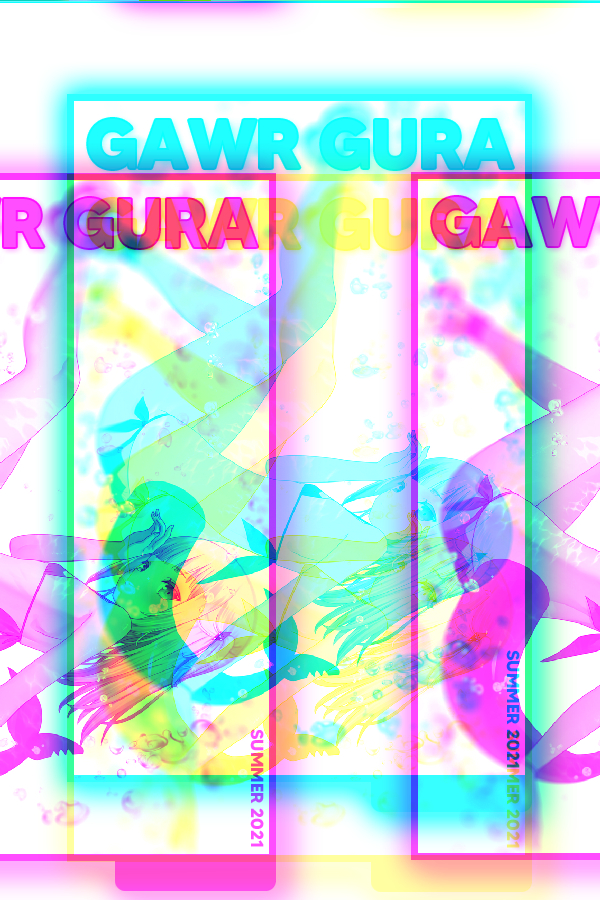
<style>
.page{position:relative;width:600px;height:900px}
.page>*{position:absolute;margin:0}
.t1{font:68.3px "MADETOMMY-Bold";color:#20ffff}
</style>
<div class="page">
<p class="t1" style="left:88px;top:116px;width:425px;height:50px">GAWR GURA</p>
</div>
